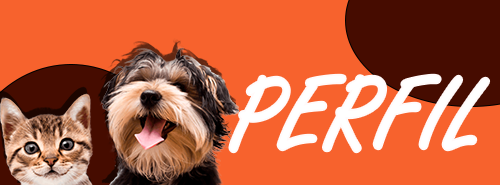
<style>
.page{position:relative;width:500px;height:185px;background:#f7622d}
.page>*{position:absolute;margin:0}
.t1{font:110.3px "FreestyleScript-Regular";letter-spacing:-0.01em;color:#ffffff;font-weight:bold}
</style>
<div class="page">
<p class="t1" style="left:230px;top:75px;width:259px;height:77px">PERFIL</p>
</div>
